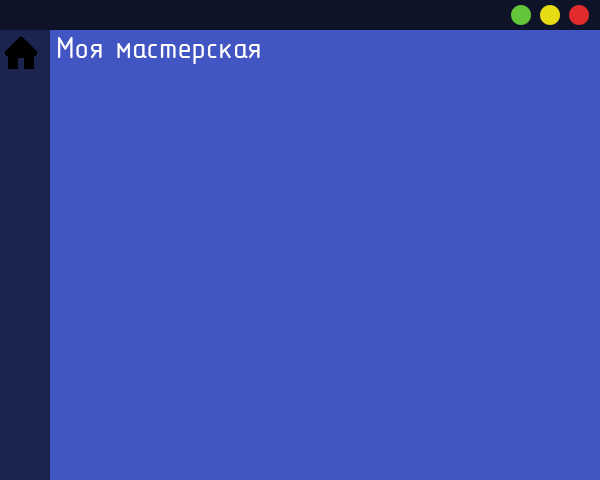
<style>
.page{position:relative;width:600px;height:480px;background:#4156c2}
.page>*{position:absolute;margin:0}
.t1{font:30px "GOSTTypeBU";color:#ffffff}
</style>
<div class="page">
<p class="t1" style="left:58px;top:37px;width:202px;height:27px">Моя мастерская</p>
</div>
